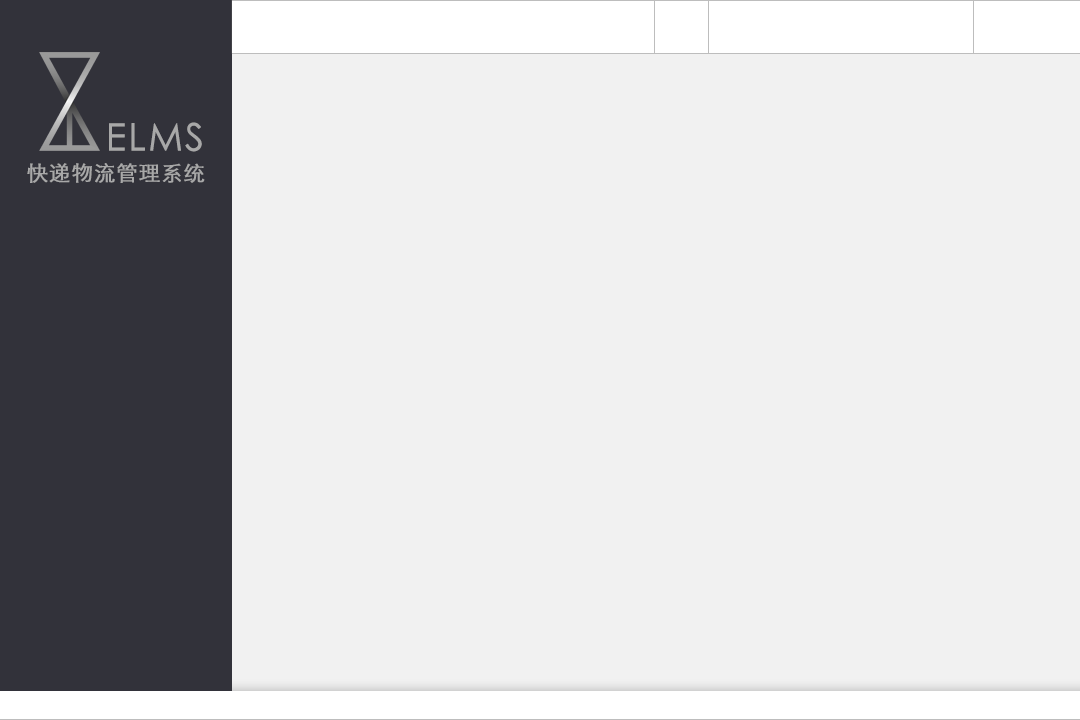
<style>
.page{position:relative;width:1080px;height:720px;background:#f1f1f1}
.page>*{position:absolute;margin:0}
.t1{font:21.1px/42.1px "STXihei";letter-spacing:0.035em;color:#a8a8a8;font-weight:bold}
.t2{font:37.6px/42.1px "STXihei";letter-spacing:0.035em;color:#a8a8a8;font-weight:bold}
</style>
<div class="page">
<p class="t1" style="left:27px;top:122px;width:178px;height:61px;text-align:right"><span class="t2">ELMS<br></span>快递物流管理系统</p>
</div>
